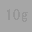
<style>
.page{position:relative;width:32px;height:32px;background:#a6a6a6}
.page>*{position:absolute;margin:0}
.t1{font:14px "HGSGothicE";color:#969696}
</style>
<div class="page">
<p class="t1" style="left:7px;top:9px;width:21px;height:13px">10g</p>
</div>
